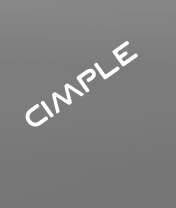
<style>
.page{position:relative;width:176px;height:208px}
.page>*{position:absolute;margin:0}
.t1{font:24px "PlanetNS";color:#ffffff}
</style>
<div class="page">
<p class="t1" style="left:25px;top:41px;width:113px;height:86px;rotate:-35deg">Cimple</p>
</div>
